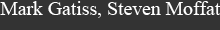
<style>
.page{position:relative;width:220px;height:30px;background:#333333}
.page>*{position:absolute;margin:0}
.t1{font:19.5px "TimesNewRomanPSMT";color:#ffffff}
</style>
<div class="page">
<p class="t1" style="left:0px;top:1px;width:221px;height:17px">Mark Gatiss, Steven Moffat</p>
</div>
